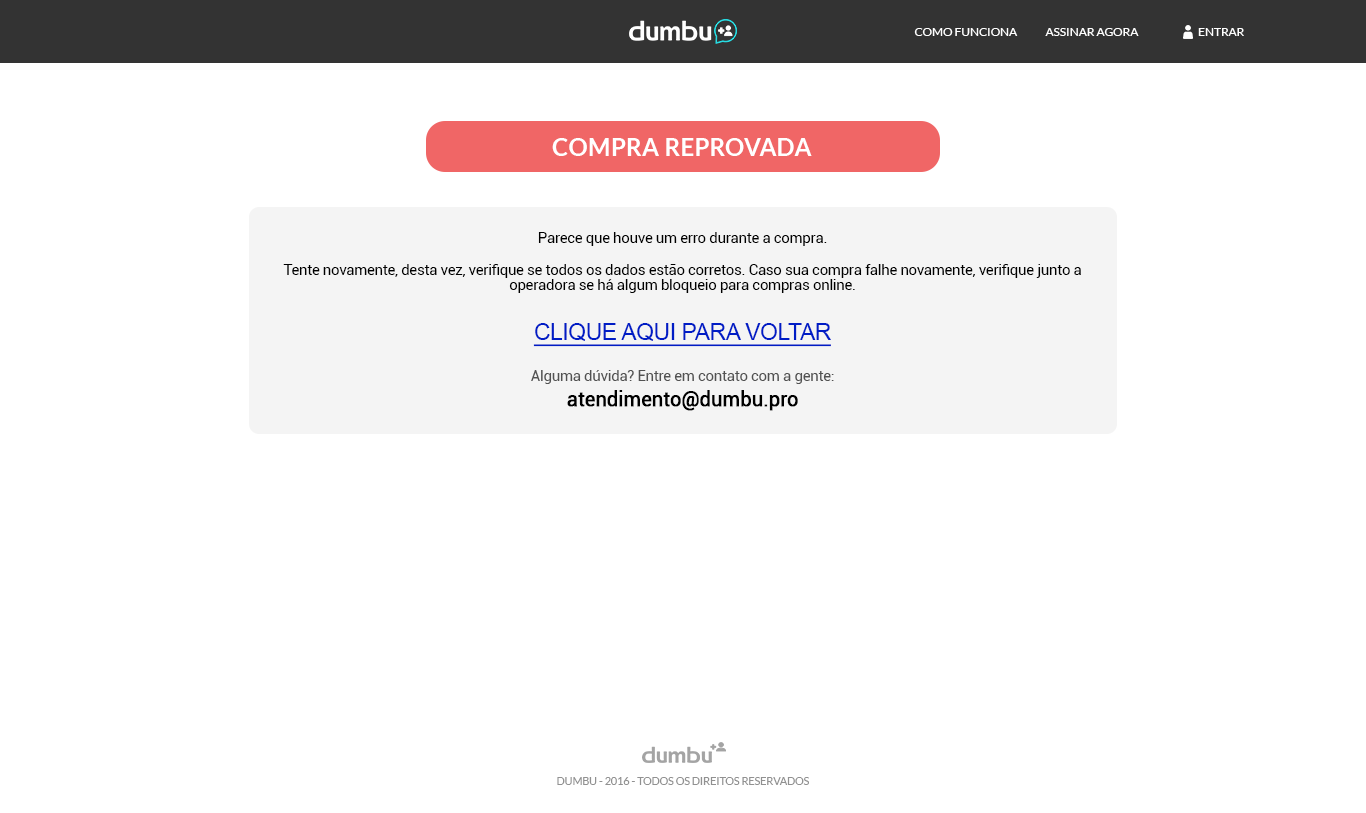
<style>
.page{position:relative;width:1366px;height:813px;background:#ffffff}
.page>*{position:absolute;margin:0}
.t1{font:12px "Lato-Regular";color:#ffffff;text-transform:uppercase}
.t2{font:12px "Lato-Regular";color:#ffffff}
.t3{font:24.4px "Lato-Bold";color:#ffffff;text-transform:uppercase}
.t4{font:15px/15.7px "Roboto-Regular";letter-spacing:-0.02em;color:#000000}
.t5{font:23px/34.3px "ArialMT";letter-spacing:-0.02em;color:#001cc5;text-transform:uppercase;text-decoration:underline}
.t6{font:15px/25px "Roboto-Regular";letter-spacing:-0.02em;color:#000000}
.t7{font:15px/15.7px "Roboto-Regular";letter-spacing:-0.02em;color:#525252}
.t8{font:20px/25px "Roboto-Regular";letter-spacing:-0.02em;color:#000000;font-weight:bold}
.t9{font:10.6px "Lato-Regular";color:#919191;text-transform:uppercase}
</style>
<div class="page">
<p class="t1" style="left:914px;top:28px;width:104px;height:8px">como funciona</p>
<p class="t1" style="left:1045px;top:28px;width:94px;height:8px">Assinar agora</p>
<p class="t2" style="left:1198px;top:28px;width:46px;height:8px">ENTRAR</p>
<p class="t3" style="left:552px;top:138px;width:260px;height:18px">compra reprovada</p>
<p class="t4" style="left:283px;top:232px;width:798px;height:179px;text-align:center">Parece que houve um erro durante a compra.<br><br>Tente novamente, desta vez, verifique se todos os dados estão corretos. Caso sua compra falhe novamente, verifique junto a operadora se há algum bloqueio para compras online.<br><br><span class="t5">Clique aqui para voltar<br></span><span class="t6"><br></span><span class="t7">Alguma dúvida? Entre em contato com a gente: <br></span><span class="t8">atendimento@dumbu.pro</span></p>
<p class="t9" style="left:557px;top:777px;width:252px;height:8px">dUMBU - 2016 - TODOS OS DIREITOS RESERVADOS</p>
</div>
